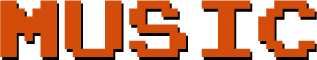
<style>
.page{position:relative;width:317px;height:60px;background:#d34c0a}
.page>*{position:absolute;margin:0}
.t1{font:64.5px "PressStartReg";color:#d34c0a}
</style>
<div class="page">
<p class="t1" style="left:0px;top:0px;width:315px;height:57px">MUSIC</p>
<p class="t1" style="left:2px;top:3px;width:315px;height:57px">MUSIC</p>
</div>
